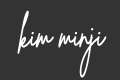
<style>
.page{position:relative;width:120px;height:80px;background:#333333}
.page>*{position:absolute;margin:0}
.t1{font:36px/55px "BrittanySignatureRegular";letter-spacing:-0.05em;color:#ffffff;font-weight:bold;scale:0.8 1}
</style>
<div class="page">
<p class="t1" style="left:17px;top:10px;width:90px;height:68px">kim minji</p>
</div>
